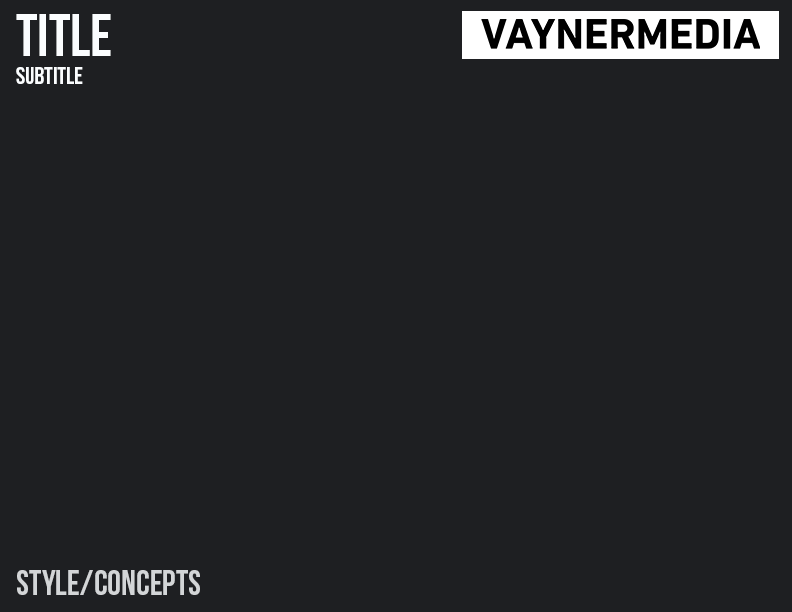
<style>
.page{position:relative;width:792px;height:612px;background:#1e1f22}
.page>*{position:absolute;margin:0}
.t1{font:60px "BebasNeue";color:#fbfdff}
.t2{font:24px "BebasNeue";color:#fbfdff}
.t3{font:35.1px "BebasNeue";color:#d3d5d7}
</style>
<div class="page">
<p class="t1" style="left:16px;top:14px;width:95px;height:42px">Title</p>
<p class="t2" style="left:16px;top:67px;width:67px;height:17px">Subtitle</p>
<p class="t3" style="left:17px;top:570px;width:183px;height:25px">Style/Concepts</p>
</div>
